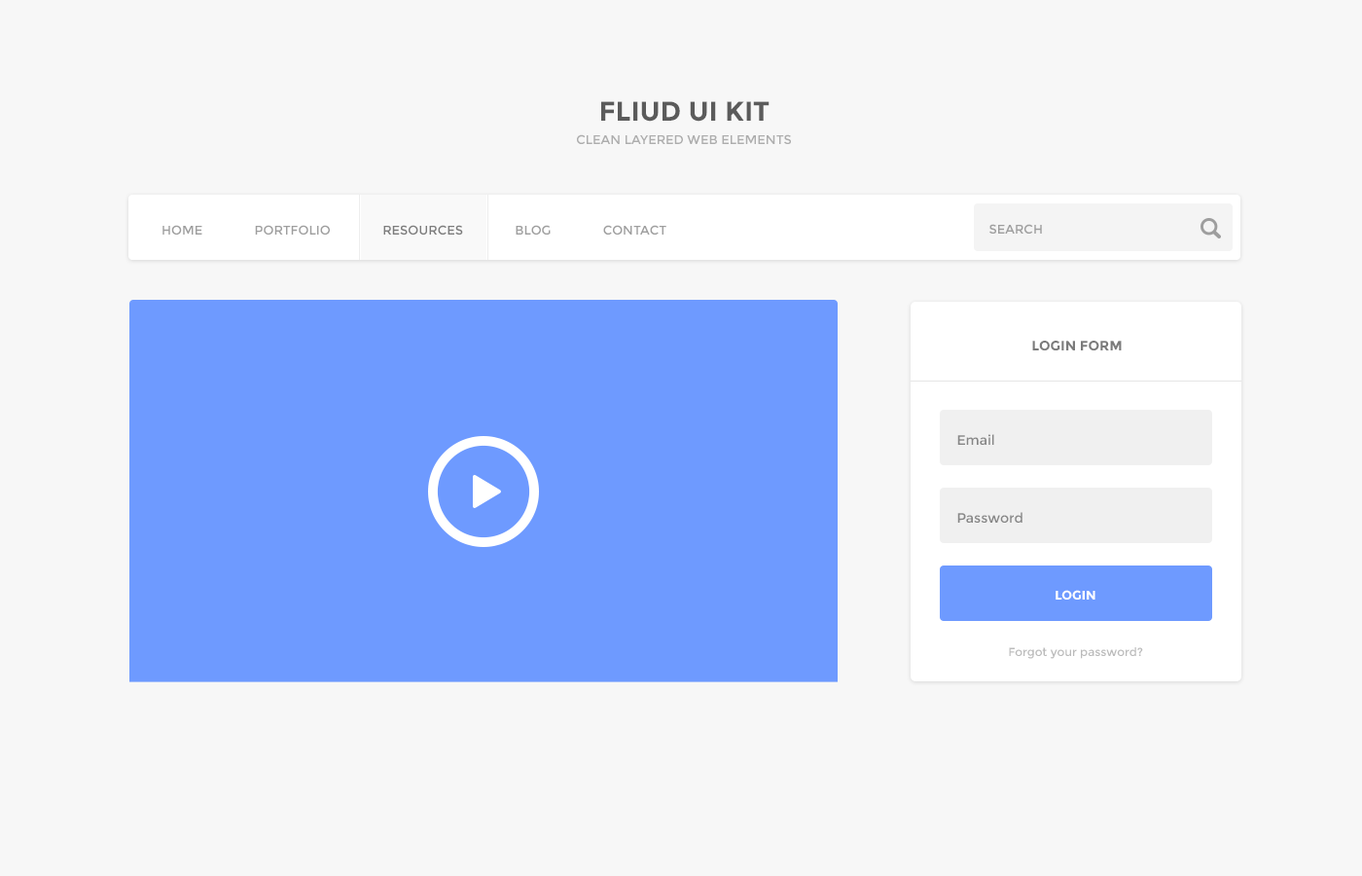
<style>
.page{position:relative;width:1362px;height:876px;background:#f7f7f7}
.page>*{position:absolute;margin:0}
.t1{font:27.2px "Montserrat-Bold";color:#5b5b5b;text-transform:uppercase}
.t2{font:12.6px "Montserrat-Regular";color:#adadad;text-transform:uppercase}
.t3{font:12.6px "Montserrat-Regular";color:#9e9e9e;text-transform:uppercase}
.t4{font:12.6px "Montserrat-Regular";color:#7c7c7c;text-transform:uppercase}
.t5{font:13.6px "Montserrat-Bold";color:#7b7b7b;text-transform:uppercase}
.t6{font:13.6px "Montserrat-Regular";color:#868686}
.t7{font:12.6px "Montserrat-Bold";color:#ffffff;text-transform:uppercase}
.t8{font:11.7px "Montserrat-Regular";color:#bbbbbb}
</style>
<div class="page">
<p class="t1" style="left:601px;top:101px;width:168px;height:21px">Fliud UI KIT</p>
<p class="t2" style="left:577px;top:134px;width:214px;height:10px">Clean layered web elements</p>
<p class="t3" style="left:162px;top:225px;width:504px;height:9px">Home               Portfolio               <span class="t4">Resources               </span>Blog               Contact</p>
<p class="t3" style="left:989px;top:224px;width:53px;height:9px">Search</p>
<p class="t5" style="left:1032px;top:340px;width:90px;height:10px">Login FOrm</p>
<p class="t6" style="left:957px;top:434px;width:37px;height:11px">Email</p>
<p class="t6" style="left:957px;top:512px;width:65px;height:10px">Password</p>
<p class="t7" style="left:1056px;top:590px;width:39px;height:9px">Login</p>
<p class="t8" style="left:1009px;top:647px;width:134px;height:12px">Forgot your password?</p>
</div>
